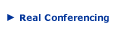
<style>
.page{position:relative;width:115px;height:35px;background:#ffffff}
.page>*{position:absolute;margin:0}
.t1{font:9px "Verdana-Bold";color:#003399}
.t2{font:10px "Mediascape-OSD-Icon-Regular";letter-spacing:0.075em;color:#003399}
</style>
<div class="page">
<p class="t1" style="left:7px;top:14px;width:102px;height:9px"><span class="t2">A </span>Real Conferencing</p>
</div>
